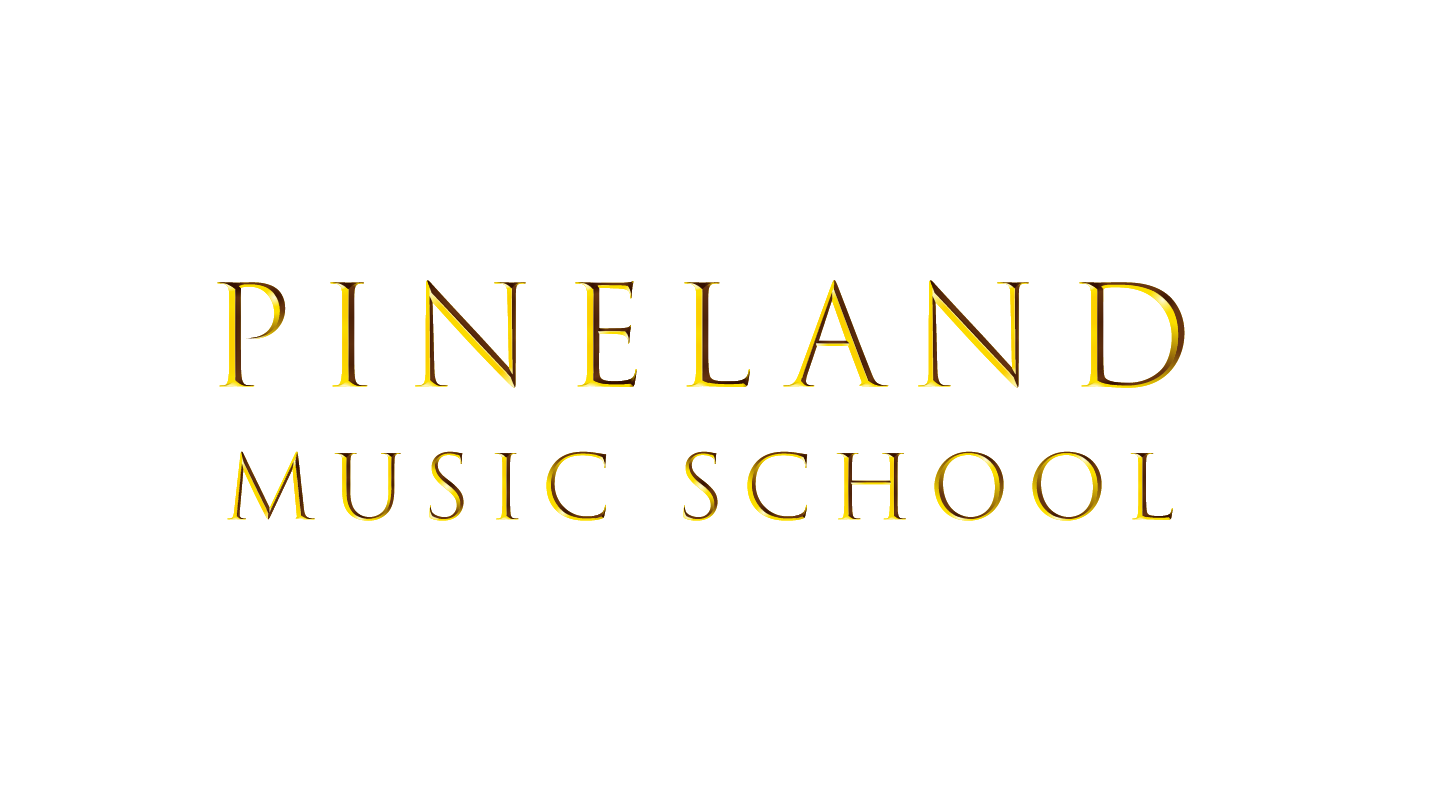
<style>
.page{position:relative;width:1432px;height:812px;background:#ffffff}
.page>*{position:absolute;margin:0}
.t1{font:87.5px/133.3px "TrajanColor-Concept";letter-spacing:0.2em}
.t2{font:137.5px/175px "TrajanColor-Concept";letter-spacing:0.2em}
</style>
<div class="page">
<p class="t1" style="left:217px;top:280px;width:968px;height:241px;text-align:center"><span class="t2">PineLanD<br></span>Music School</p>
</div>
